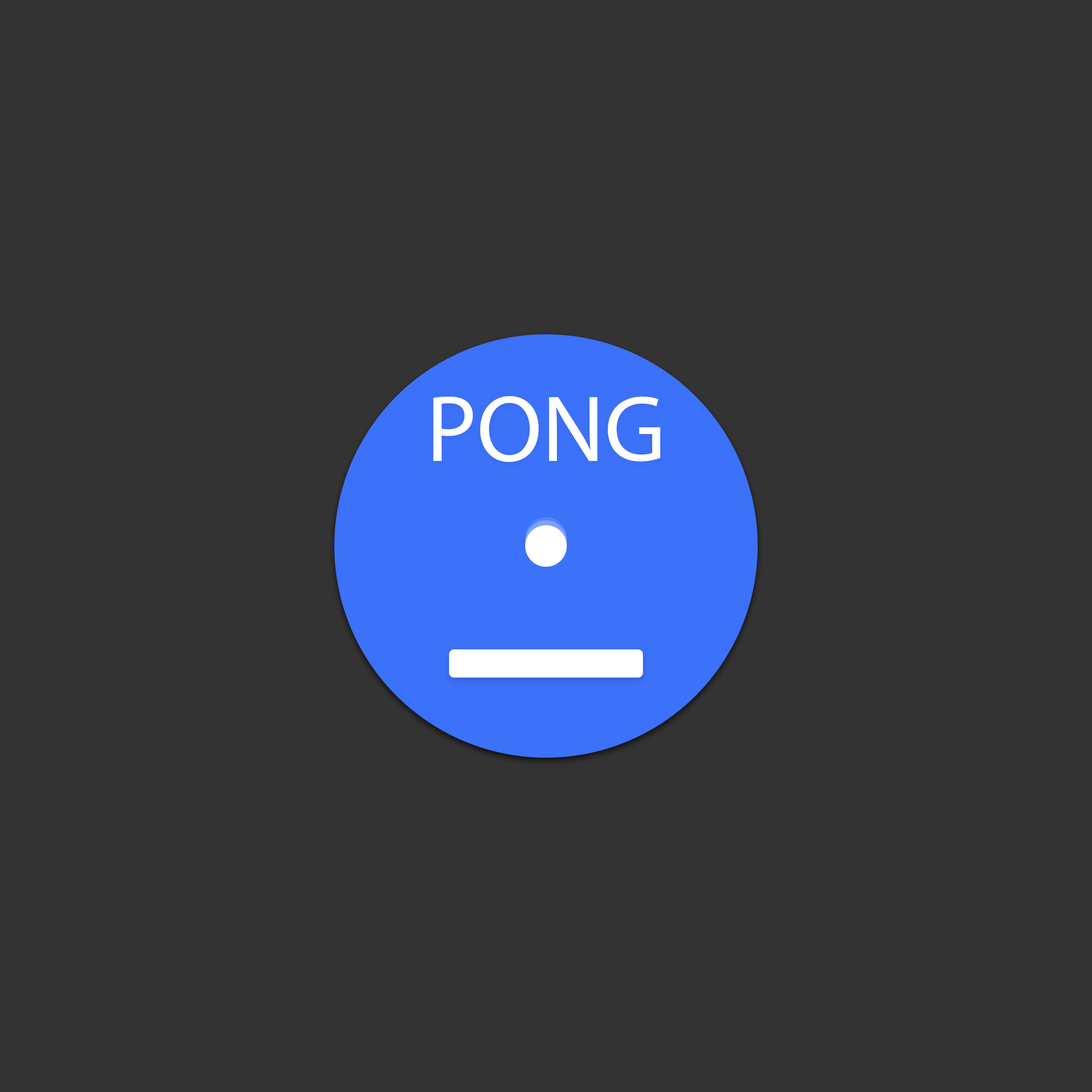
<style>
.page{position:relative;width:1092px;height:1092px;background:#333333}
.page>*{position:absolute;margin:0}
.t1{font:95px "MyriadPro-Regular";color:#ffffff}
</style>
<div class="page">
<p class="t1" style="left:433px;top:396px;width:227px;height:66px">PONG</p>
</div>
